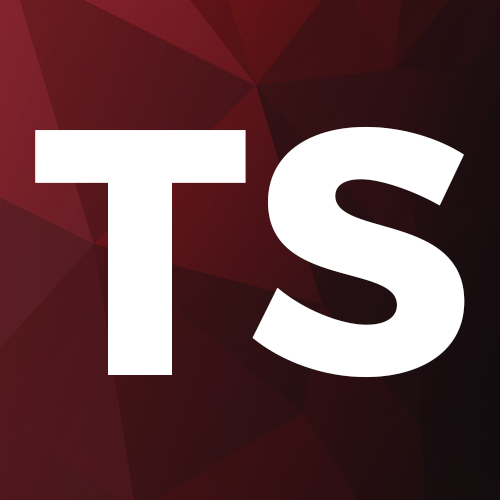
<style>
.page{position:relative;width:500px;height:500px;background:#ffffff}
.page>*{position:absolute;margin:0}
.t1{font:350px "Montserrat-Bold";color:#ffffff}
</style>
<div class="page">
<p class="t1" style="left:35px;top:126px;width:430px;height:252px">TS</p>
</div>
